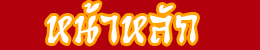
<style>
.page{position:relative;width:260px;height:50px;background:#b3000d}
.page>*{position:absolute;margin:0}
.t1{font:45.8px "MNMahaHeng-Regular";color:#ffffff}
</style>
<div class="page">
<p class="t1" style="left:47px;top:3px;width:150px;height:41px">หน้าหลัก</p>
</div>
